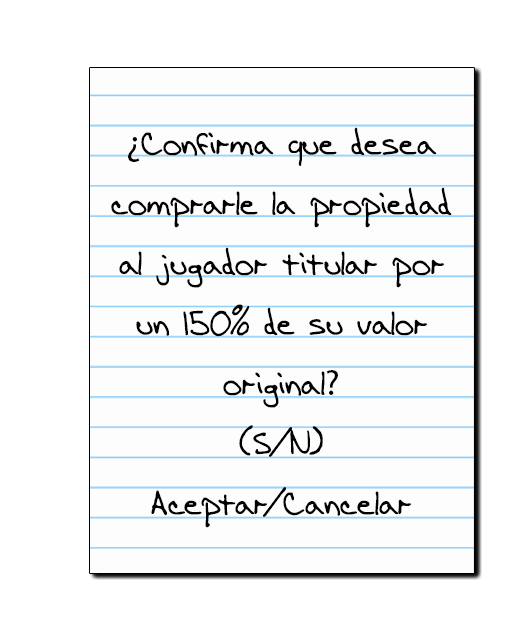
<style>
.page{position:relative;width:512px;height:640px;background:#ffffff}
.page>*{position:absolute;margin:0}
.t1{font:36px/60px "AEnigmaScrawl4BRK";color:#000000}
.t2{font:36px/60px "MyriadPro-Regular";color:#000000}
</style>
<div class="page">
<p class="t1" style="left:111px;top:127px;width:341px;height:401px;text-align:center"><span class="t2">¿</span>Confirma que desea<br>comprarle la propiedad<br>al jugador titular por<br>un 150% de su valor<br>original<span class="t2">?<br></span>(S/N)<br>Aceptar/Cancelar</p>
</div>
